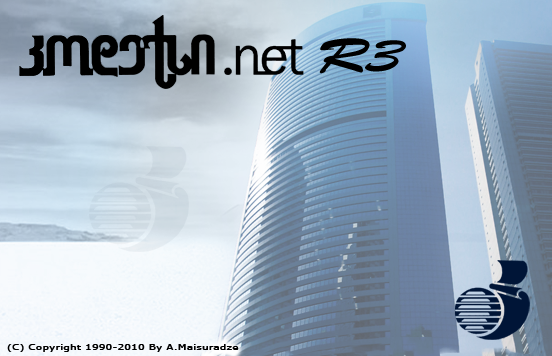
<style>
.page{position:relative;width:552px;height:356px}
.page>*{position:absolute;margin:0}
.t1{font:48px "BrushScriptStd";letter-spacing:0.005em;color:#000000;scale:1.28 1}
.t2{font:8px "MSReferenceSansSerif";letter-spacing:0.005em;color:#000000;font-weight:bold;scale:1.28 1}
</style>
<div class="page">
<p class="t1" style="left:319px;top:38px;width:87px;height:36px">R3</p>
<p class="t2" style="left:7px;top:344px;width:232px;height:8px">(C) Copyright 1990-2010 By A.Maisuradze</p>
</div>
